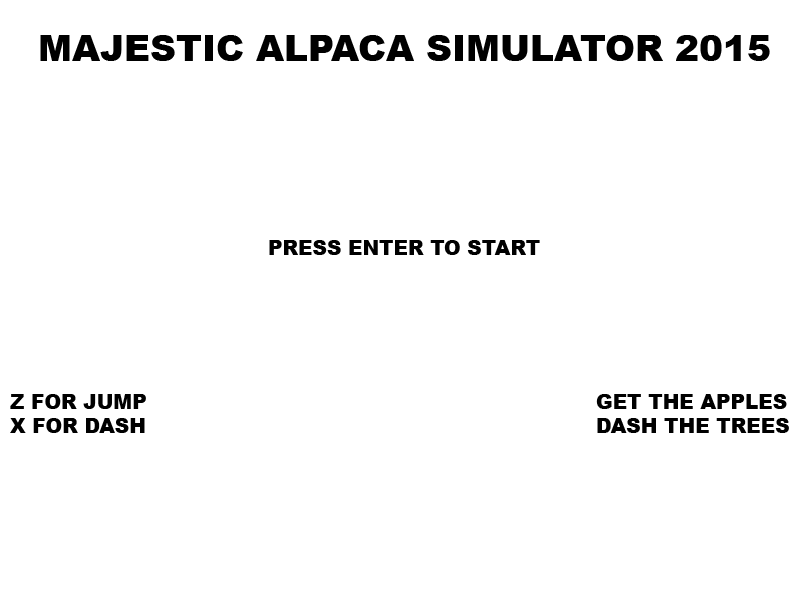
<style>
.page{position:relative;width:800px;height:600px;background:#ffffff}
.page>*{position:absolute;margin:0}
.t1{font:36px "Arial-Black";color:#000000}
.t2{font:20px "Arial-Black";color:#000000}
</style>
<div class="page">
<p class="t1" style="left:40px;top:35px;width:730px;height:26px">MAJESTIC ALPACA SIMULATOR 2015</p>
<p class="t2" style="left:269px;top:240px;width:271px;height:15px">PRESS ENTER TO START</p>
<p class="t2" style="left:10px;top:394px;width:136px;height:39px">Z FOR JUMP<br>X FOR DASH</p>
<p class="t2" style="left:596px;top:394px;width:193px;height:39px">GET THE APPLES<br>DASH THE TREES</p>
</div>
